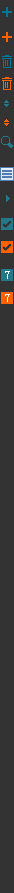
<style>
.page{position:relative;width:14px;height:893px;background:#333333}
.page>*{position:absolute;margin:0}
.t1{font:12px "SimSun";color:#ffffff}
</style>
<div class="page">
<p class="t1" style="left:5px;top:271px;width:5px;height:8px">7</p>
<p class="t1" style="left:5px;top:294px;width:5px;height:8px">7</p>
</div>
